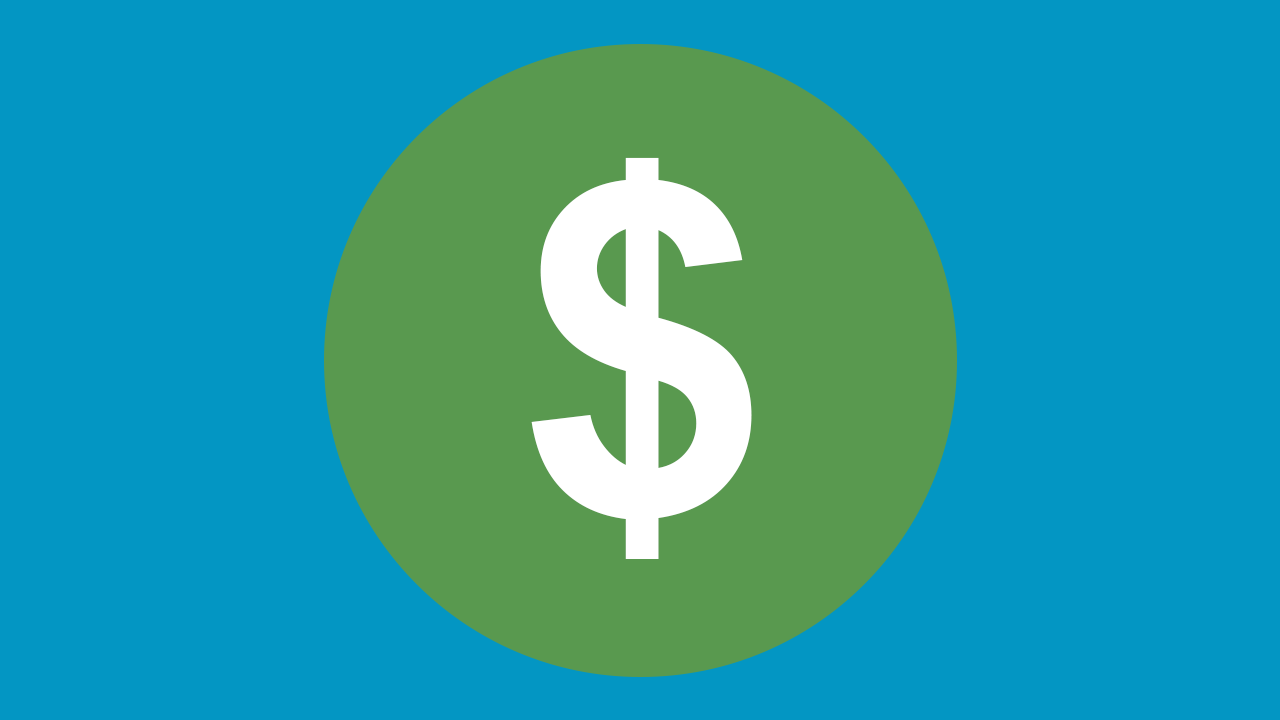
<style>
.page{position:relative;width:1280px;height:720px;background:#0396c3}
.page>*{position:absolute;margin:0}
.t1{font:461px "Arial-BoldMT";color:#ffffff}
</style>
<div class="page">
<p class="t1" style="left:531px;top:157px;width:221px;height:402px">$</p>
</div>
